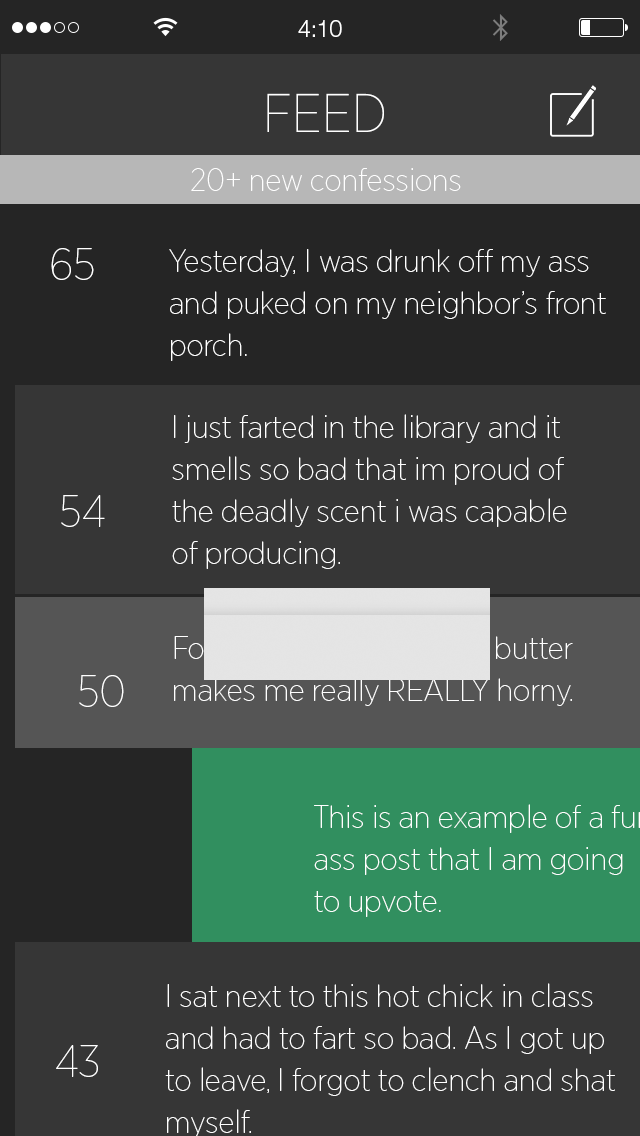
<style>
.page{position:relative;width:640px;height:1136px;background:#363636}
.page>*{position:absolute;margin:0}
.t1{font:22.6px "HelveticaNeueLTStd-Lt";color:#ffffff}
.t2{font:54.3px "GothamNarrow-Thin";color:#ffffff}
.t3{font:31.7px "GothamNarrow-Thin";color:#ffffff}
.t4{font:45.3px "GothamNarrow-Thin";color:#ffffff}
.t5{font:31.7px/42.1px "GothamNarrow-Thin";color:#ffffff}
</style>
<div class="page">
<p class="t1" style="left:298px;top:20px;width:44px;height:17px">4:10</p>
<p class="t2" style="left:267px;top:93px;width:117px;height:39px">FEED</p>
<p class="t3" style="left:191px;top:168px;width:270px;height:23px">20+ new confessions</p>
<p class="t4" style="left:51px;top:248px;width:43px;height:32px">65</p>
<p class="t5" style="left:169px;top:249px;width:437px;height:112px;text-align:justify">Yesterday, I was drunk off my ass <br>and puked on my neighbor’s front<br>porch.</p>
<p class="t5" style="left:172px;top:414px;width:395px;height:155px;text-align:justify">I just farted in the library and it <br>smells so bad that im proud of <br>the deadly scent i was capable <br>of producing.</p>
<p class="t4" style="left:61px;top:495px;width:44px;height:32px">54</p>
<p class="t4" style="left:79px;top:675px;width:45px;height:32px">50</p>
<p class="t5" style="left:165px;top:983px;width:450px;height:155px;text-align:justify">I sat next to this hot chick in class<br>and had to fart so bad. As I got up <br>to leave, I forgot to clench and shat<br>myself.</p>
<p class="t4" style="left:56px;top:1045px;width:42px;height:32px">43</p>
</div>
